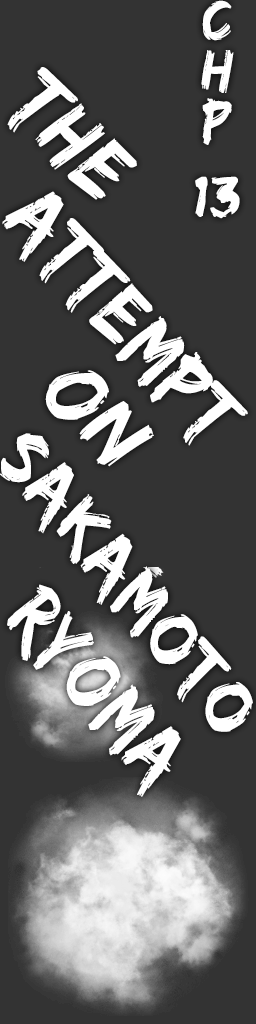
<style>
.page{position:relative;width:256px;height:1024px;background:#333333}
.page>*{position:absolute;margin:0}
.t1{font:60px/25.1px "EdoSZ";letter-spacing:0.03em;color:#ffffff}
.t2{font:90.5px "EdoSZ";letter-spacing:0.03em;color:#ffffff;scale:0.95 1}
.t3{font:86.9px "EdoSZ";letter-spacing:0.03em;color:#ffffff;scale:0.95 1}
.t4{font:91.3px "EdoSZ";letter-spacing:0.03em;color:#ffffff;scale:0.96 1}
.t5{font:80.9px "EdoSZ";letter-spacing:0.03em;color:#ffffff;scale:0.96 1}
.t6{font:87.1px "EdoSZ";letter-spacing:0.03em;color:#ffffff;scale:0.9 1}
</style>
<div class="page">
<p class="t1" style="left:195px;top:0px;width:45px;height:219px;text-align:center">C<br><br>H<br><br>P<br><br><br>13</p>
<p class="t2" style="left:7px;top:67px;width:130px;height:133px;rotate:46deg">The</p>
<p class="t3" style="left:2px;top:191px;width:246px;height:255px;rotate:48deg">Attempt</p>
<p class="t4" style="left:45px;top:370px;width:109px;height:97px;rotate:45deg">On</p>
<p class="t5" style="left:0px;top:433px;width:253px;height:299px;rotate:51deg">Sakamoto</p>
<p class="t6" style="left:7px;top:584px;width:174px;height:213px;rotate:50deg">Ryoma</p>
</div>
